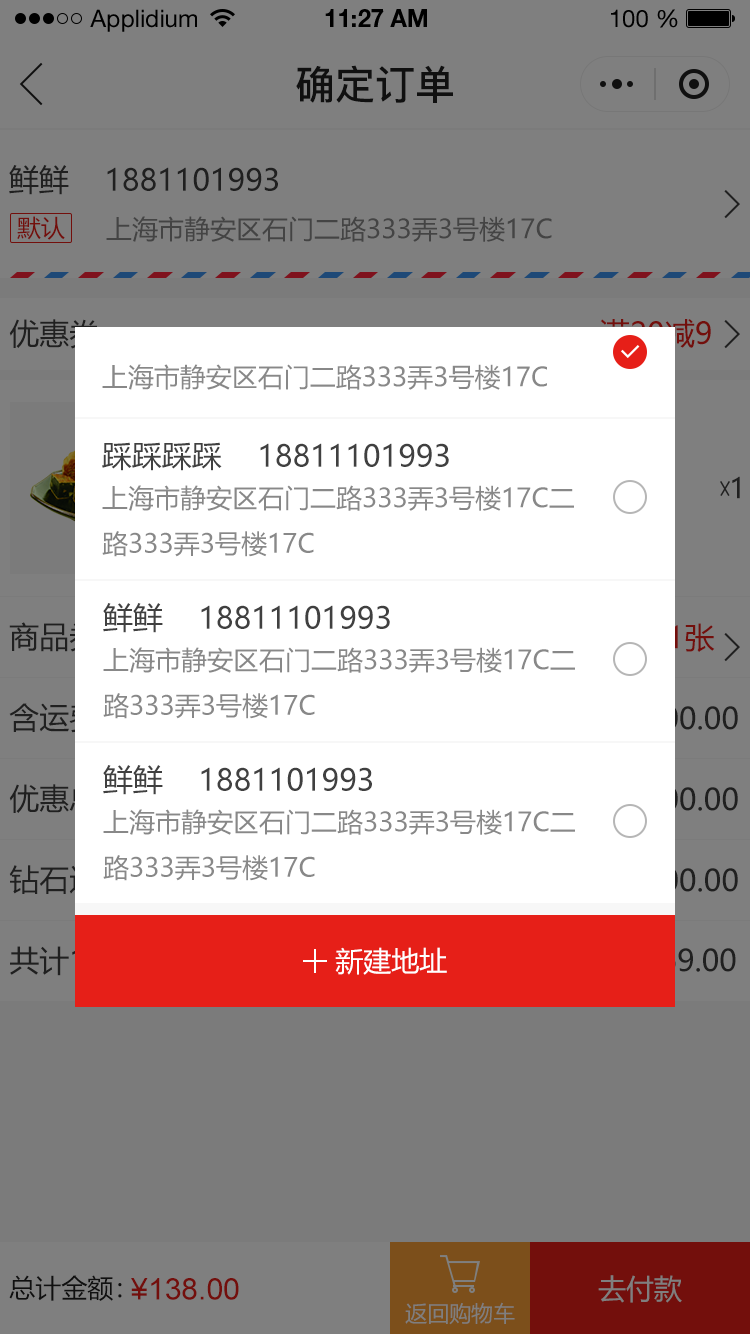
<style>
.page{position:relative;width:750px;height:1334px;background:#7f7f7f}
.page>*{position:absolute;margin:0}
.t1{font:24px "HelveticaNeueLTStd-Roman";color:#000000}
.t2{font:24px "HelveticaNeueLTStd-Bd";color:#000000}
.t3{font:40px "PingFang-SC-Bold";color:#202020;text-transform:uppercase}
.t4{font:30px "MicrosoftYaHei";color:#202020;text-transform:uppercase}
.t5{font:24px "MicrosoftYaHei";color:#730f0c;text-transform:uppercase}
.t6{font:26px "MicrosoftYaHei";color:#444444;text-transform:uppercase}
.t7{font:26.1px "MicrosoftYaHei";color:#888888;text-transform:uppercase}
.t8{font:30px "MicrosoftYaHei";color:#404040;text-transform:uppercase}
.t9{font:26px "MicrosoftYaHei";color:#888888;text-transform:uppercase}
.t10{font:28px "MicrosoftYaHei";color:#202020;text-transform:uppercase}
.t11{font:30px "MicrosoftYaHei";color:#730f0c;text-transform:uppercase}
.t12{font:30px "MicrosoftYaHei";text-transform:uppercase}
.t13{font:28px "MicrosoftYaHei";color:#ffffff;text-transform:uppercase}
.t14{font:26px "MicrosoftYaHei";color:#202020;text-transform:uppercase}
.t15{font:30px "ArialMT";color:#730f0c;text-transform:uppercase}
.t16{font:28px "MicrosoftYaHei";color:#7f7f7f;text-transform:uppercase}
.t17{font:22px "MicrosoftYaHei";color:#7f7f7f;text-transform:uppercase}
</style>
<div class="page">
<p class="t1" style="left:90px;top:9px;width:107px;height:23px">Applidium</p>
<p class="t2" style="left:325px;top:9px;width:102px;height:18px">11:27 AM</p>
<p class="t1" style="left:611px;top:9px;width:67px;height:19px">100 %</p>
<p class="t3" style="left:296px;top:65px;width:157px;height:38px">确定订单</p>
<p class="t4" style="left:9px;top:165px;width:60px;height:30px">鲜鲜</p>
<p class="t4" style="left:107px;top:167px;width:171px;height:24px">1881101993</p>
<p class="t5" style="left:17px;top:216px;width:48px;height:24px">默认</p>
<p class="t6" style="left:106px;top:216px;width:446px;height:26px">上海市静安区石门二路333弄3号楼17c</p>
<p class="t4" style="left:9px;top:319px;width:90px;height:30px">优惠券</p>
<p class="t7" style="left:102px;top:364px;width:445px;height:26px">上海市静安区石门二路333弄3号楼17c</p>
<p class="t8" style="left:102px;top:442px;width:120px;height:29px">踩踩踩踩</p>
<p class="t8" style="left:260px;top:443px;width:189px;height:24px">18811101993</p>
<p class="t9" style="left:102px;top:485px;width:472px;height:72px">上海市静安区石门二路333弄3号楼17c二<br>路333弄3号楼17c</p>
<p class="t10" style="left:732px;top:476px;width:8px;height:23px">1</p>
<p class="t8" style="left:103px;top:603px;width:60px;height:30px">鲜鲜</p>
<p class="t8" style="left:201px;top:605px;width:189px;height:24px">18811101993</p>
<p class="t11" style="left:669px;top:623px;width:46px;height:29px">1张</p>
<p class="t9" style="left:103px;top:647px;width:472px;height:72px">上海市静安区石门二路333弄3号楼17c二<br>路333弄3号楼17c</p>
<p class="t8" style="left:103px;top:765px;width:60px;height:30px">鲜鲜</p>
<p class="t8" style="left:201px;top:767px;width:171px;height:24px">1881101993</p>
<p class="t9" style="left:103px;top:809px;width:472px;height:72px">上海市静安区石门二路333弄3号楼17c二<br>路333弄3号楼17c</p>
<p class="t12" style="left:10px;top:946px;width:165px;height:30px">共计1件商品</p>
<p class="t13" style="left:335px;top:947px;width:112px;height:28px">新建地址</p>
<p class="t14" style="left:9px;top:1275px;width:113px;height:26px">总计金额：</p>
<p class="t15" style="left:131px;top:1278px;width:108px;height:22px">¥138.00</p>
<p class="t16" style="left:598px;top:1275px;width:84px;height:28px">去付款</p>
<p class="t17" style="left:405px;top:1302px;width:110px;height:23px">返回购物车</p>
</div>
